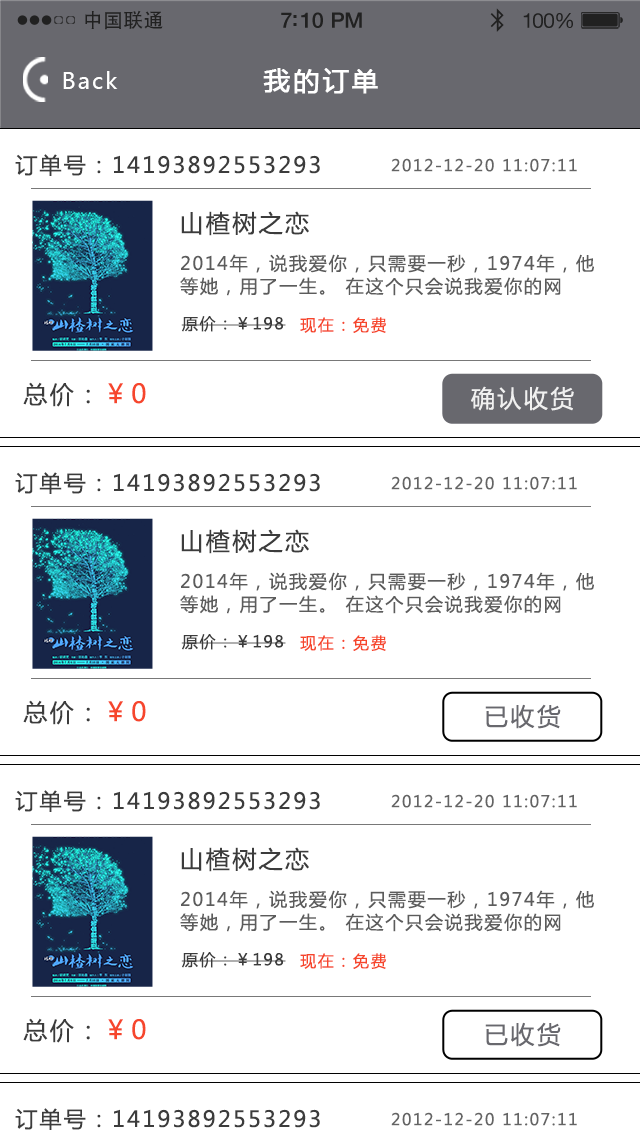
<style>
.page{position:relative;width:640px;height:1136px;background:#ffffff}
.page>*{position:absolute;margin:0}
.t1{font:19.7px "AdobeHeitiStd-Regular";letter-spacing:0.02em;color:#212121}
.t2{font:21.4px "HelveticaNeue-Medium";letter-spacing:-0.02em;color:#212121}
.t3{font:20.6px "HelveticaNeue";letter-spacing:-0.02em;color:#212121}
.t4{font:22px "MicrosoftYaHei";letter-spacing:0.1em;color:#ffffff}
.t5{font:26px "MicrosoftYaHei";letter-spacing:0.1em;color:#ffffff;font-weight:bold}
.t6{font:22px "MicrosoftYaHei";letter-spacing:0.1em;color:#3c3c3c}
.t7{font:16px "MicrosoftYaHei";letter-spacing:0.1em;color:#646464}
.t8{font:24px "MicrosoftYaHei";letter-spacing:0.1em;color:#3c3c3c}
.t9{font:18px/22.9px "MicrosoftYaHei";letter-spacing:0.1em;color:#5c5c5c}
.t10{font:16px "MicrosoftYaHei";letter-spacing:0.1em;color:#3c3c3c}
.t11{font:16px "MicrosoftYaHei";letter-spacing:0.1em;color:#f6462c}
.t12{font:26px "MicrosoftYaHei";letter-spacing:0.1em;color:#f6462c}
.t13{font:24px "MicrosoftYaHei";letter-spacing:0.1em;color:#f0f0f0}
.t14{font:24px "MicrosoftYaHei";letter-spacing:0.1em;color:#68686e}
</style>
<div class="page">
<p class="t1" style="left:85px;top:10px;width:78px;height:20px">中国联通</p>
<p class="t2" style="left:281px;top:12px;width:81px;height:16px">7:10 PM</p>
<p class="t3" style="left:523px;top:13px;width:50px;height:16px">100%</p>
<p class="t4" style="left:63px;top:71px;width:55px;height:18px">Back</p>
<p class="t5" style="left:263px;top:68px;width:115px;height:26px">我的订单</p>
<p class="t6" style="left:15px;top:154px;width:305px;height:22px">订单号：14193892553293</p>
<p class="t7" style="left:391px;top:158px;width:186px;height:14px">2012-12-20 11:07:11</p>
<p class="t8" style="left:181px;top:211px;width:128px;height:25px">山楂树之恋</p>
<p class="t9" style="left:180px;top:254px;width:414px;height:42px">2014年，说我爱你，只需要一秒，1974年，他<br>等她，用了一生。 在这个只会说我爱你的网</p>
<p class="t10" style="left:181px;top:316px;width:105px;height:16px">原价：￥198</p>
<p class="t11" style="left:300px;top:317px;width:86px;height:16px">现在：免费</p>
<p class="t8" style="left:23px;top:382px;width:123px;height:25px">总价：<span class="t12">￥0</span></p>
<p class="t13" style="left:471px;top:386px;width:103px;height:25px">确认收货</p>
<p class="t6" style="left:15px;top:472px;width:305px;height:22px">订单号：14193892553293</p>
<p class="t7" style="left:391px;top:476px;width:186px;height:14px">2012-12-20 11:07:11</p>
<p class="t8" style="left:181px;top:529px;width:128px;height:25px">山楂树之恋</p>
<p class="t9" style="left:180px;top:572px;width:414px;height:42px">2014年，说我爱你，只需要一秒，1974年，他<br>等她，用了一生。 在这个只会说我爱你的网</p>
<p class="t10" style="left:181px;top:634px;width:105px;height:16px">原价：￥198</p>
<p class="t11" style="left:300px;top:635px;width:86px;height:16px">现在：免费</p>
<p class="t8" style="left:23px;top:700px;width:123px;height:25px">总价：<span class="t12">￥0</span></p>
<p class="t14" style="left:485px;top:704px;width:76px;height:25px">已收货</p>
<p class="t6" style="left:15px;top:790px;width:305px;height:22px">订单号：14193892553293</p>
<p class="t7" style="left:391px;top:794px;width:186px;height:14px">2012-12-20 11:07:11</p>
<p class="t8" style="left:181px;top:847px;width:128px;height:25px">山楂树之恋</p>
<p class="t9" style="left:180px;top:890px;width:414px;height:42px">2014年，说我爱你，只需要一秒，1974年，他<br>等她，用了一生。 在这个只会说我爱你的网</p>
<p class="t10" style="left:181px;top:952px;width:105px;height:16px">原价：￥198</p>
<p class="t11" style="left:300px;top:953px;width:86px;height:16px">现在：免费</p>
<p class="t8" style="left:23px;top:1018px;width:123px;height:25px">总价：<span class="t12">￥0</span></p>
<p class="t14" style="left:485px;top:1022px;width:76px;height:25px">已收货</p>
<p class="t6" style="left:15px;top:1108px;width:305px;height:22px">订单号：14193892553293</p>
<p class="t7" style="left:391px;top:1112px;width:186px;height:14px">2012-12-20 11:07:11</p>
</div>
